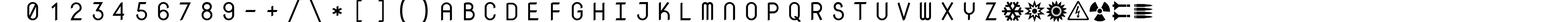
<style>
.page{position:relative;width:1568px;height:22px;background:#ffffff}
.page>*{position:absolute;margin:0}
.t1{font:24.5px "NovaMono";color:#000000}
.t2{font:20.4px "NovaMono";color:#000000}
</style>
<div class="page">
<p class="t1" style="left:27px;top:2px;width:11px;height:18px">0</p>
<p class="t1" style="left:51px;top:2px;width:7px;height:18px">1</p>
<p class="t1" style="left:70px;top:2px;width:12px;height:18px">2</p>
<p class="t1" style="left:93px;top:2px;width:10px;height:18px">3</p>
<p class="t1" style="left:113px;top:2px;width:12px;height:18px">4</p>
<p class="t1" style="left:136px;top:2px;width:11px;height:18px">5</p>
<p class="t1" style="left:158px;top:2px;width:11px;height:18px">6</p>
<p class="t1" style="left:179px;top:2px;width:12px;height:18px">7</p>
<p class="t1" style="left:201px;top:2px;width:11px;height:18px">8</p>
<p class="t1" style="left:223px;top:2px;width:11px;height:18px">9</p>
<p class="t1" style="left:267px;top:5px;width:11px;height:11px">+</p>
<p class="t1" style="left:332px;top:6px;width:10px;height:10px">*</p>
<p class="t2" style="left:356px;top:0px;width:6px;height:22px">[</p>
<p class="t2" style="left:378px;top:0px;width:6px;height:22px">]</p>
<p class="t1" style="left:441px;top:2px;width:11px;height:18px">A</p>
<p class="t1" style="left:464px;top:2px;width:11px;height:18px">B</p>
<p class="t1" style="left:485px;top:2px;width:11px;height:18px">C</p>
<p class="t1" style="left:506px;top:3px;width:12px;height:17px">D</p>
<p class="t1" style="left:528px;top:2px;width:11px;height:18px">E</p>
<p class="t1" style="left:551px;top:2px;width:9px;height:18px">F</p>
<p class="t1" style="left:572px;top:2px;width:11px;height:18px">G</p>
<p class="t1" style="left:593px;top:2px;width:12px;height:18px">H</p>
<p class="t1" style="left:616px;top:2px;width:10px;height:18px">I</p>
<p class="t1" style="left:637px;top:2px;width:11px;height:18px">J</p>
<p class="t1" style="left:659px;top:2px;width:11px;height:18px">K</p>
<p class="t1" style="left:680px;top:2px;width:11px;height:18px">L</p>
<p class="t1" style="left:702px;top:2px;width:11px;height:18px">M</p>
<p class="t1" style="left:724px;top:2px;width:11px;height:18px">N</p>
<p class="t1" style="left:746px;top:2px;width:11px;height:18px">O</p>
<p class="t1" style="left:768px;top:2px;width:11px;height:18px">P</p>
<p class="t1" style="left:789px;top:2px;width:12px;height:20px">Q</p>
<p class="t1" style="left:811px;top:2px;width:11px;height:18px">R</p>
<p class="t1" style="left:833px;top:2px;width:11px;height:18px">S</p>
<p class="t1" style="left:854px;top:2px;width:13px;height:18px">T</p>
<p class="t1" style="left:877px;top:2px;width:11px;height:18px">U</p>
<p class="t1" style="left:897px;top:2px;width:13px;height:18px">V</p>
<p class="t1" style="left:920px;top:2px;width:11px;height:18px">W</p>
<p class="t1" style="left:942px;top:2px;width:11px;height:18px">X</p>
<p class="t1" style="left:964px;top:2px;width:11px;height:18px">Y</p>
<p class="t1" style="left:985px;top:2px;width:12px;height:18px">Z</p>
<p class="t1" style="left:245px;top:10px;width:11px;height:2px">-</p>
</div>
